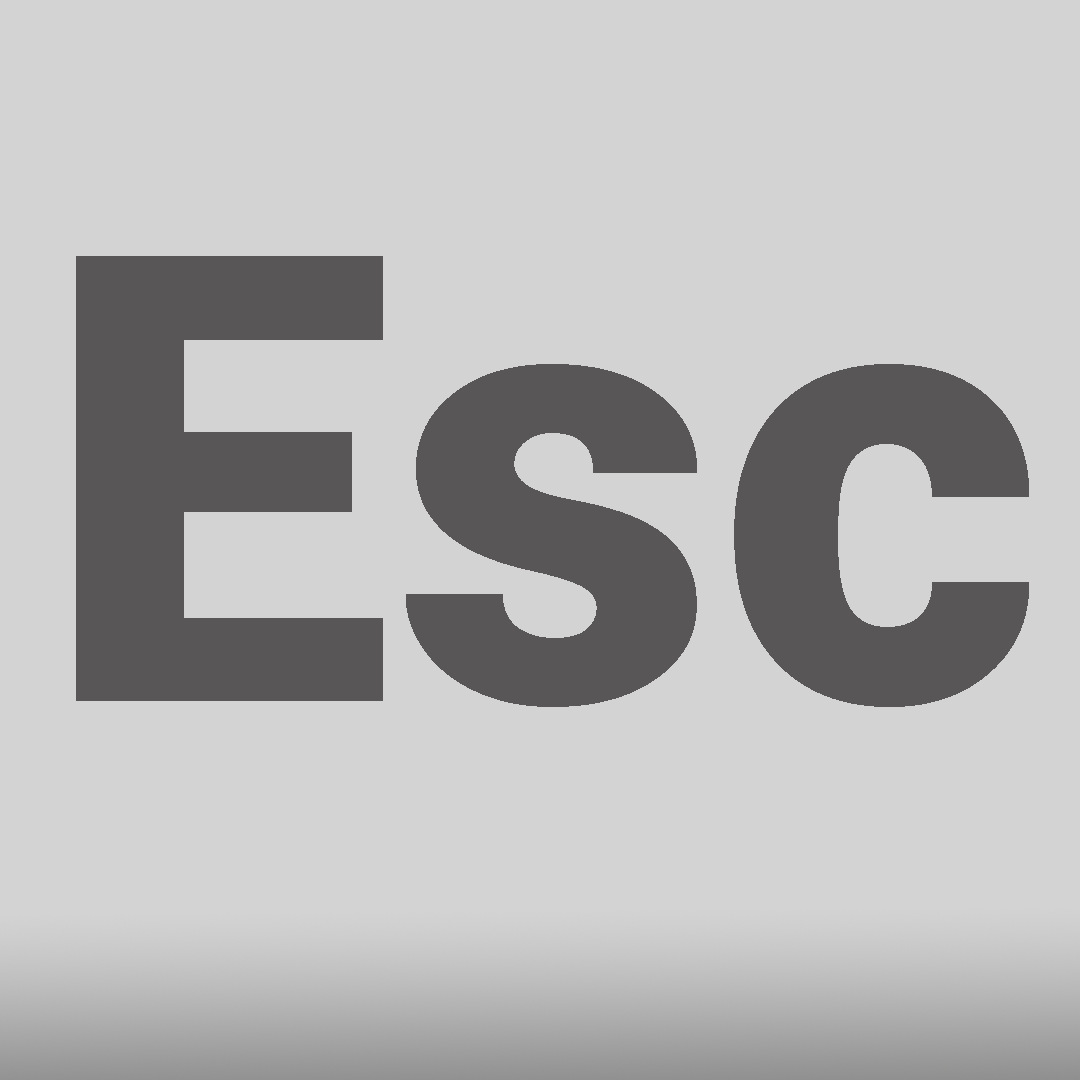
<style>
.page{position:relative;width:1080px;height:1080px;background:#d3d3d3}
.page>*{position:absolute;margin:0}
.t1{font:625px "Roboto-Black";letter-spacing:0.005em;color:#585656}
</style>
<div class="page">
<p class="t1" style="left:76px;top:256px;width:953px;height:451px">Esc</p>
</div>
